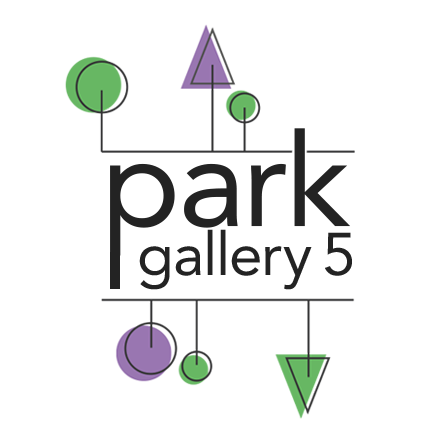
<style>
.page{position:relative;width:437px;height:437px;background:#ffffff}
.page>*{position:absolute;margin:0}
.t1{font:141.8px "BahijJanna";letter-spacing:-0.02em;color:#232323}
.t2{font:65.6px "BahijJanna";letter-spacing:-0.02em;color:#232323}
</style>
<div class="page">
<p class="t1" style="left:110px;top:128px;width:241px;height:128px">park</p>
<p class="t2" style="left:139px;top:229px;width:213px;height:61px">gallery 5</p>
</div>
